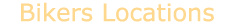
<style>
.page{position:relative;width:234px;height:28px;background:#ffffff}
.page>*{position:absolute;margin:0}
.t1{font:24px "Verdana";color:#ffd890}
</style>
<div class="page">
<p class="t1" style="left:21px;top:2px;width:193px;height:20px">Bikers Locations</p>
</div>
